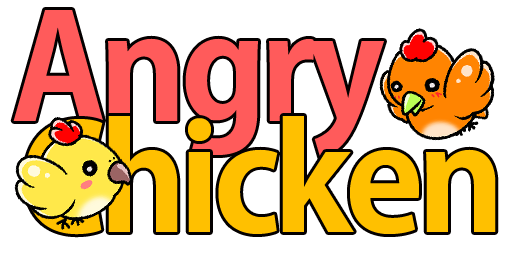
<style>
.page{position:relative;width:512px;height:256px;background:#ffffff}
.page>*{position:absolute;margin:0}
.t1{font:144px "KozGoPro-Bold";letter-spacing:-0.05em;color:#ff5c5c}
.t2{font:144px "KozGoPro-Bold";letter-spacing:-0.05em;color:#ffc000}
</style>
<div class="page">
<p class="t1" style="left:13px;top:10px;width:371px;height:148px">Angry</p>
<p class="t2" style="left:25px;top:116px;width:471px;height:119px">Chicken</p>
</div>
